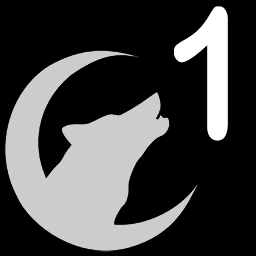
<style>
.page{position:relative;width:256px;height:256px;background:#000000}
.page>*{position:absolute;margin:0}
.t1{font:182.4px "ArialRoundedMTBold";letter-spacing:-0.4em;color:#ffffff;font-variant:small-caps;scale:0.83 1}
</style>
<div class="page">
<p class="t1" style="left:174px;top:6px;width:54px;height:135px">1</p>
</div>
